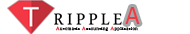
<style>
.page{position:relative;width:190px;height:34px;background:#ffffff}
.page>*{position:absolute;margin:0}
.t1{font:22.9px "MicrosoftUighur";letter-spacing:0.15em;color:#010101}
.t2{font:22.9px "Tahoma";letter-spacing:0.15em;color:#f23845}
.t3{font:3.7px "LucidaBright";letter-spacing:0.15em;color:#000000}
.t4{font:4.6px "LucidaBright";letter-spacing:0.15em;color:#d8333e}
.t5{font:4.6px "LucidaBright";letter-spacing:0.15em;color:#f23845}
</style>
<div class="page">
<p class="t1" style="left:54px;top:13px;width:68px;height:12px">RIPPLE</p>
<p class="t2" style="left:125px;top:7px;width:15px;height:17px">A</p>
<p class="t3" style="left:55px;top:26px;width:83px;height:5px"><span class="t4">A</span>utomatic <span class="t5">A</span>ccounting <span class="t5">A</span>pplication</p>
</div>
